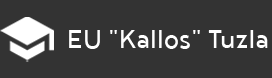
<style>
.page{position:relative;width:272px;height:78px;background:#333333}
.page>*{position:absolute;margin:0}
.t1{font:31px "Noyh-Regular";color:#ffffff}
</style>
<div class="page">
<p class="t1" style="left:69px;top:30px;width:199px;height:19px">EU "Kallos" Tuzla</p>
</div>
